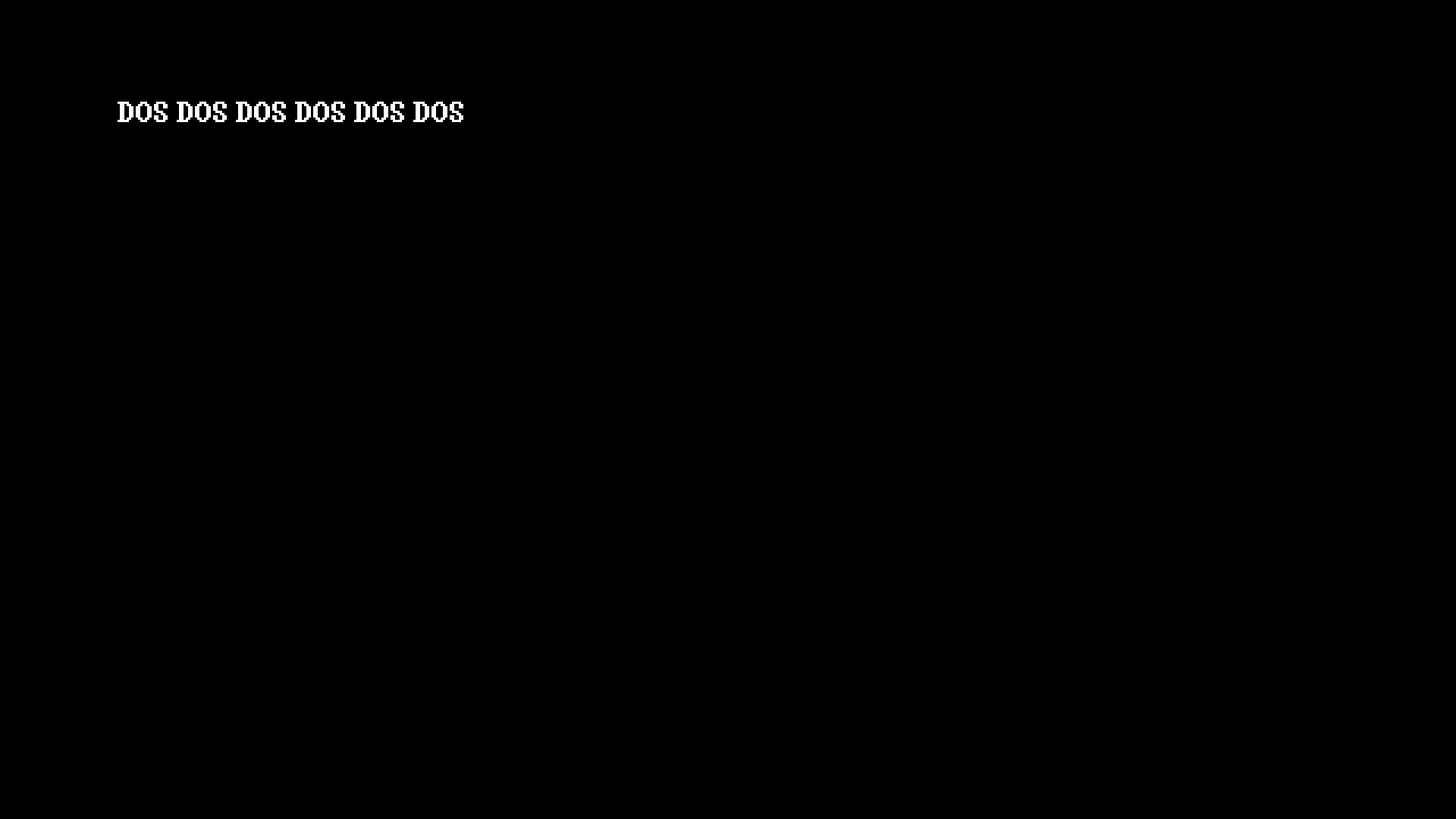
<style>
.page{position:relative;width:1456px;height:819px;background:#000000}
.page>*{position:absolute;margin:0}
.t1{font:36.4px "Windows-Command-Prompt";color:#ffffff}
</style>
<div class="page">
<p class="t1" style="left:118px;top:102px;width:345px;height:20px">DOS DOS DOS DOS DOS DOS</p>
</div>
